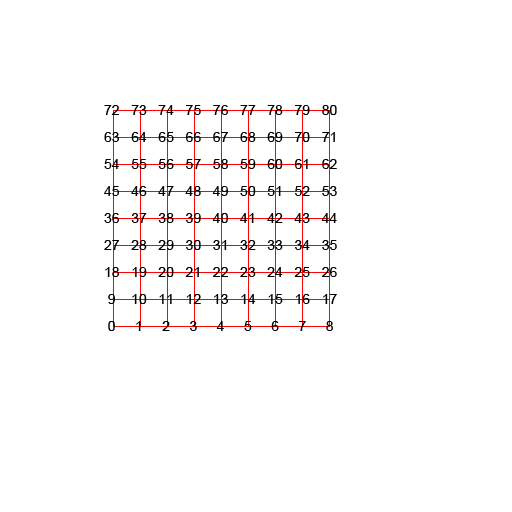
<style>
.page{position:relative;width:512px;height:512px;background:#ffffff}
.page>*{position:absolute;margin:0}
.t1{font:14px/27px "ArialMT";color:#000000}
</style>
<div class="page">
<p class="t1" style="left:104px;top:105px;width:233px;height:226px">72   73   74   75   76   77   78   79   80<br> 63   64   65   66   67   68   69   70   71<br> 54   55   56   57   58   59   60   61   62<br> 45   46   47   48   49   50   51   52   53<br> 36   37   38   39   40   41   42   43   44<br> 27   28   29   30   31   32   33   34   35<br> 18   19   20   21   22   23   24   25   26<br>  9    10   11   12   13   14   15   16   17<br>  0     1     2     3     4     5     6     7     8</p>
</div>
